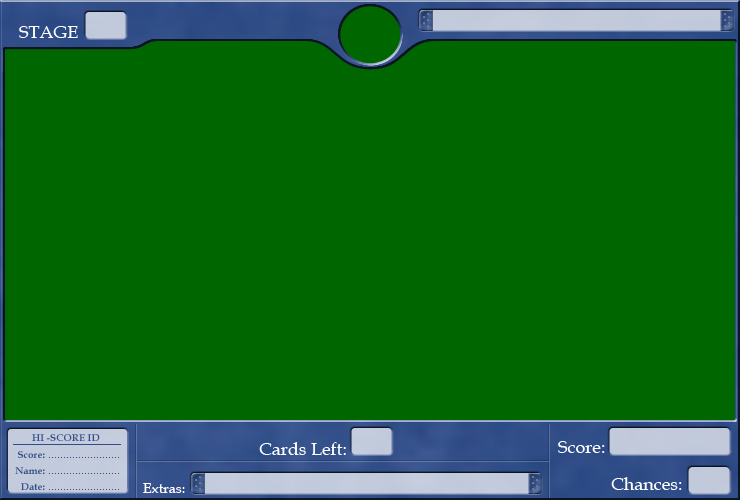
<style>
.page{position:relative;width:740px;height:500px;background:#006600}
.page>*{position:absolute;margin:0}
.t1{font:18px "BookAntiqua";color:#ffffff}
.t2{font:10px "BookAntiqua-Bold";color:#314c86}
.t3{font:14px "BookAntiqua";color:#ffffff}
</style>
<div class="page">
<p class="t1" style="left:19px;top:26px;width:59px;height:12px">STAGE</p>
<p class="t2" style="left:32px;top:434px;width:68px;height:7px">HI -SCORE ID</p>
<p class="t1" style="left:259px;top:442px;width:87px;height:13px">Cards Left:</p>
<p class="t1" style="left:558px;top:441px;width:47px;height:12px">Score:</p>
<p class="t2" style="left:18px;top:451px;width:27px;height:7px">Score:</p>
<p class="t2" style="left:15px;top:467px;width:30px;height:7px">Name:</p>
<p class="t2" style="left:21px;top:483px;width:24px;height:7px">Date:</p>
<p class="t3" style="left:143px;top:483px;width:42px;height:10px">Extras:</p>
<p class="t1" style="left:611px;top:477px;width:71px;height:13px">Chances:</p>
</div>
